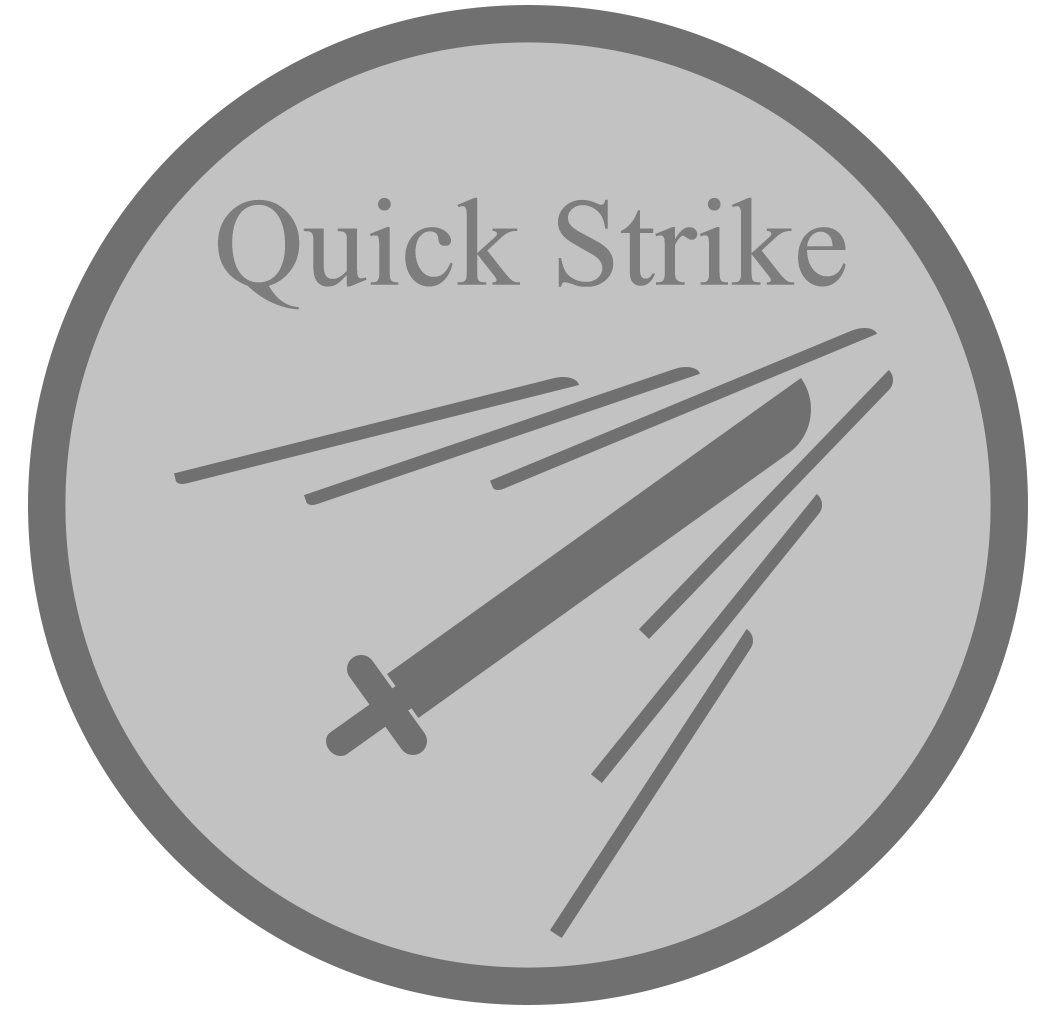
<style>
.page{position:relative;width:1063px;height:1028px;background:#c2c2c2}
.page>*{position:absolute;margin:0}
.t1{font:125px "MongolianBaiti";color:#7d7d7d}
</style>
<div class="page">
<p class="t1" style="left:218px;top:197px;width:628px;height:113px">Quick Strike</p>
</div>
